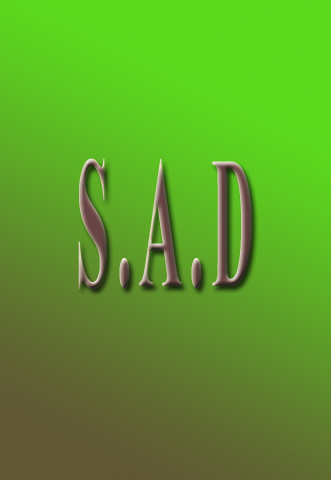
<style>
.page{position:relative;width:331px;height:480px}
.page>*{position:absolute;margin:0}
.t1{font:188px "TimesNewRomanPS-BoldMT";letter-spacing:0.12em;scale:0.32 1}
</style>
<div class="page">
<p class="t1" style="left:78px;top:158px;width:174px;height:131px">S.A.D</p>
</div>
